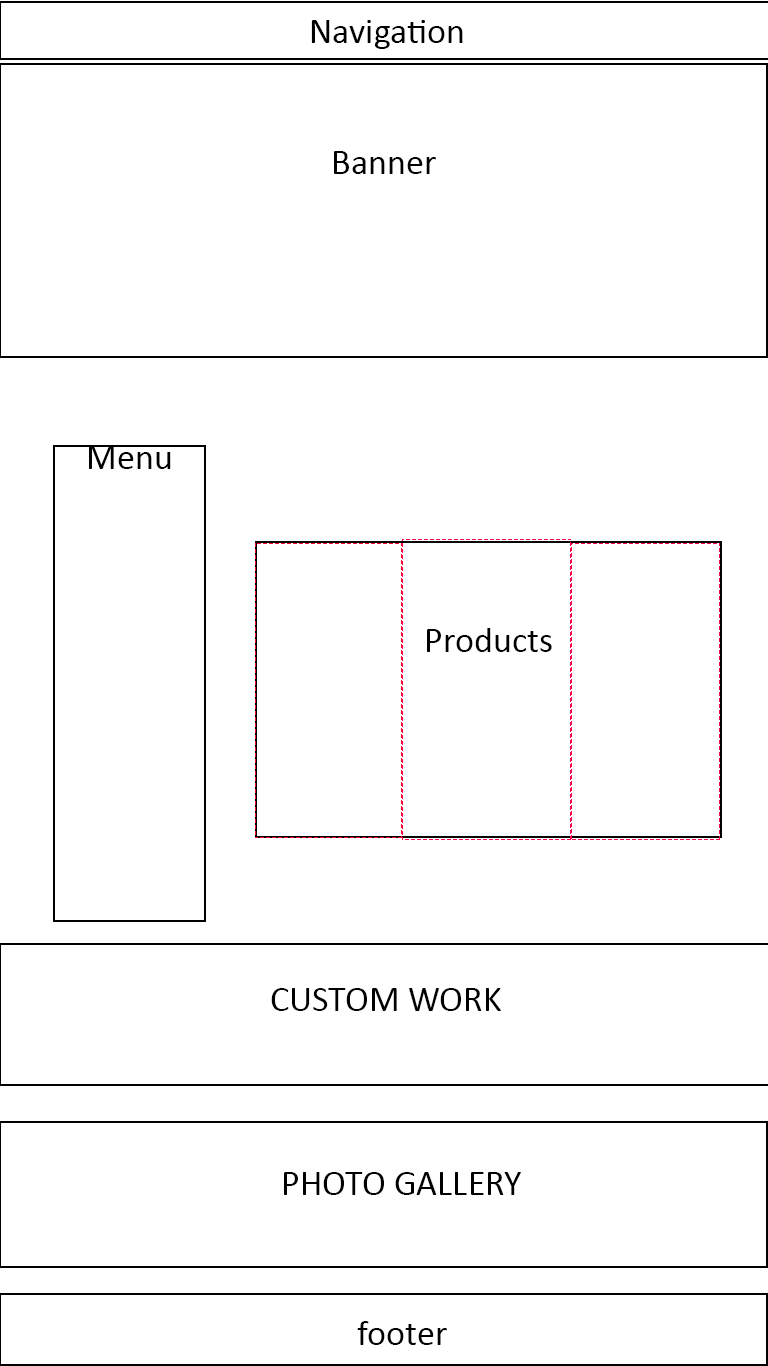
<style>
.page{position:relative;width:768px;height:1366px;background:#ffffff}
.page>*{position:absolute;margin:0}
.t1{font:36px "Calibri";color:#000000}
</style>
<div class="page">
<p class="t1" style="left:311px;top:20px;width:152px;height:29px">Navigation</p>
<p class="t1" style="left:334px;top:151px;width:102px;height:23px">Banner</p>
<p class="t1" style="left:89px;top:446px;width:82px;height:23px">Menu</p>
<p class="t1" style="left:427px;top:628px;width:125px;height:24px">Products</p>
<p class="t1" style="left:271px;top:988px;width:230px;height:23px">CUSTOM WORK</p>
<p class="t1" style="left:284px;top:1172px;width:237px;height:23px">PHOTO GALLERY</p>
<p class="t1" style="left:357px;top:1321px;width:90px;height:24px">footer</p>
</div>
